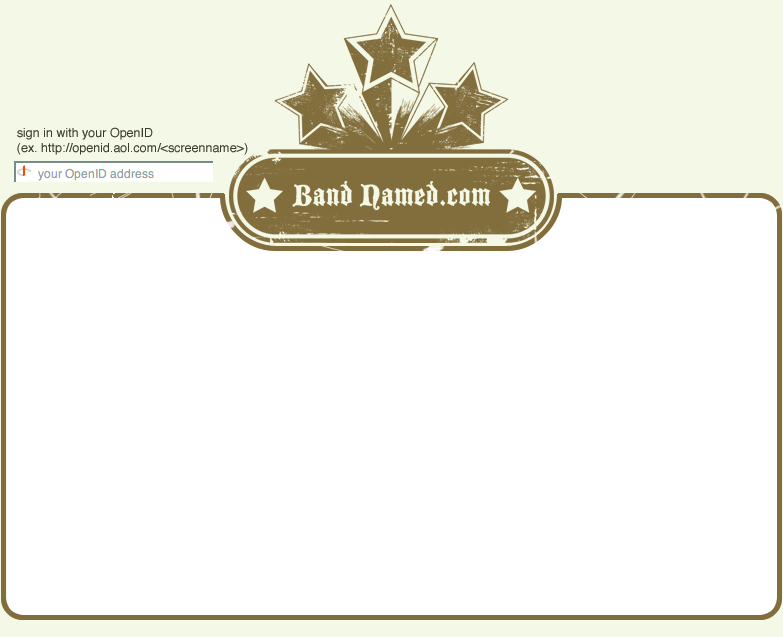
<style>
.page{position:relative;width:783px;height:637px;background:#ffffff}
.page>*{position:absolute;margin:0}
.t1{font:12.5px "Helvetica";color:#3c3b2c}
</style>
<div class="page">
<p class="t1" style="left:17px;top:127px;width:231px;height:28px">sign in with your OpenID<br>(ex. http://openid.aol.com/&lt;screenname&gt;)</p>
</div>
